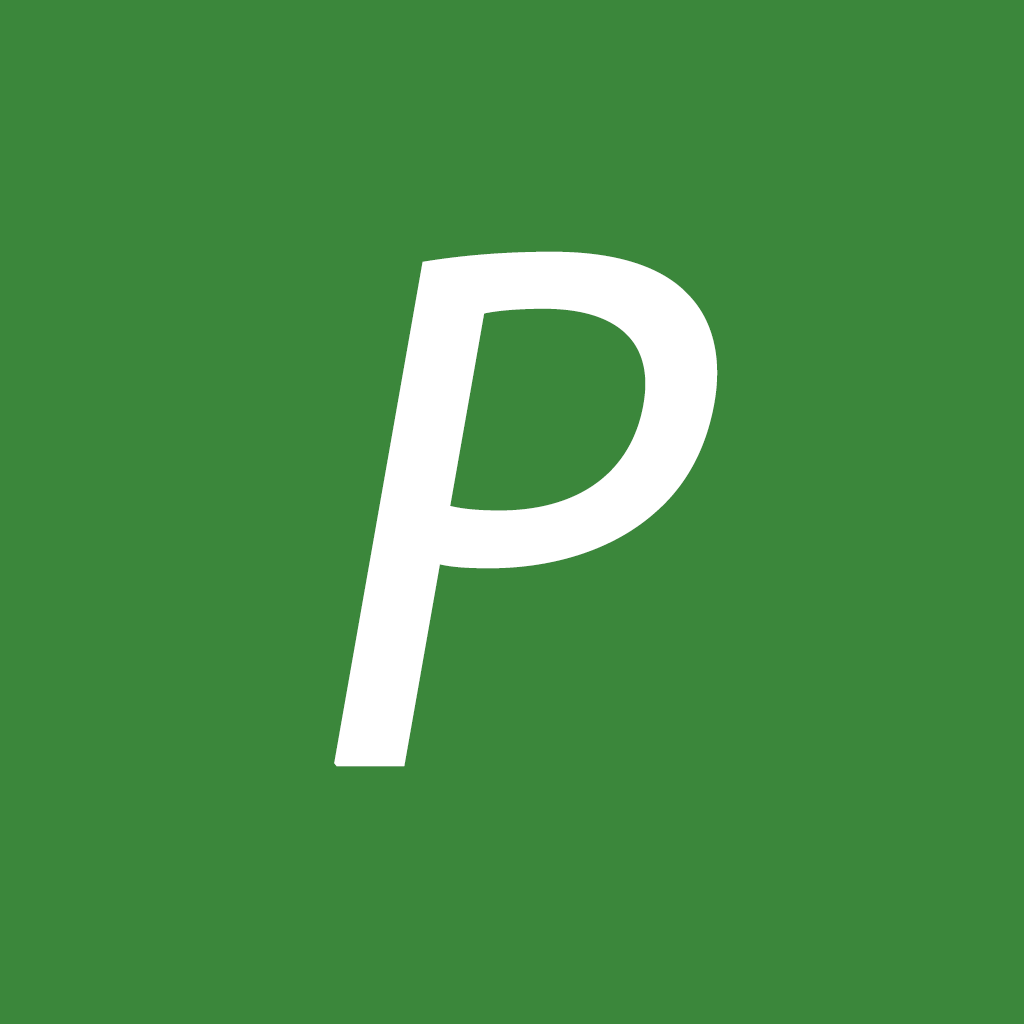
<style>
.page{position:relative;width:1024px;height:1024px;background:#3b873b}
.page>*{position:absolute;margin:0}
.t1{font:750px "MyriadPro-Regular";letter-spacing:-0.05em;color:#ffffff;font-weight:bold;font-style:italic}
</style>
<div class="page">
<p class="t1" style="left:334px;top:251px;width:384px;height:516px">P</p>
</div>
